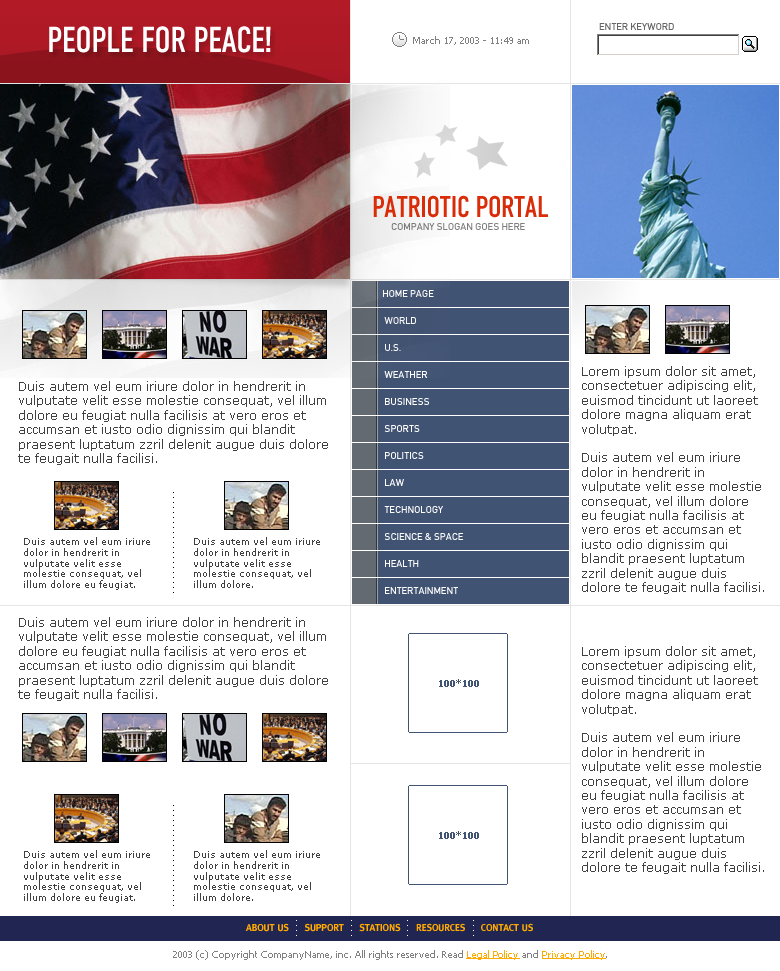
<style>
.page{position:relative;width:780px;height:971px;background:#ffffff}
.page>*{position:absolute;margin:0}
.t1{font:36px "DINCondensedC";letter-spacing:-0.02em;color:#ffffff;text-transform:uppercase}
.t2{font:10px "DinC";letter-spacing:-0.02em;color:#666666;text-transform:uppercase}
.t3{font:10px "Tahoma";color:#808080}
.t4{font:30px "DINCondensedC";letter-spacing:-0.02em;color:#d92d0a;text-transform:uppercase}
.t5{font:10px "DinC";letter-spacing:-0.02em;color:#7f7f7f;text-transform:uppercase}
.t6{font:10px/27px "DinC";letter-spacing:-0.02em;color:#ffffff;text-transform:uppercase}
.t7{font:12px "Verdana";color:#404040}
.t8{font:9px "Verdana";color:#404040}
.t9{font:9px "Verdana-Bold";color:#415373}
.t10{font:10px "MetaC-Bold";letter-spacing:-0.02em;color:#ffaa00;text-transform:uppercase}
.t11{font:10px "Tahoma";color:#ffaa00;text-decoration:underline}
</style>
<div class="page">
<p class="t1" style="left:49px;top:26px;width:222px;height:27px">people for peace!</p>
<p class="t2" style="left:599px;top:23px;width:75px;height:7px">enter keyword</p>
<p class="t3" style="left:413px;top:36px;width:116px;height:9px">March 17, 2003 - 11:49 am</p>
<p class="t4" style="left:373px;top:195px;width:175px;height:23px">patriotic portal</p>
<p class="t5" style="left:391px;top:223px;width:134px;height:7px">company slogan goes here</p>
<p class="t6" style="left:383px;top:290px;width:80px;height:304px">Home Page <br>  World <br>  U.S. <br>  Weather <br>  Business  <br>  Sports  <br>  Politics <br>  Law <br>  Technology <br>  Science &amp; Space <br>  Health <br>  Entertainment</p>
<p class="t7" style="left:582px;top:366px;width:182px;height:228px">Lorem ipsum dolor sit amet, <br>consectetuer adipiscing elit, <br>euismod tincidunt ut laoreet <br>dolore magna aliquam erat <br>volutpat. <br><br>Duis autem vel eum iriure <br>dolor in hendrerit in <br>vulputate velit esse molestie <br>consequat, vel illum dolore <br>eu feugiat nulla facilisis at <br>vero eros et accumsan et <br>iusto odio dignissim qui <br>blandit praesent luptatum <br>zzril delenit augue duis <br>dolore te feugait nulla facilisi.</p>
<p class="t7" style="left:18px;top:381px;width:310px;height:84px">Duis autem vel eum iriure dolor in hendrerit in <br>vulputate velit esse molestie consequat, vel illum <br>dolore eu feugiat nulla facilisis at vero eros et <br>accumsan et iusto odio dignissim qui blandit <br>praesent luptatum zzril delenit augue duis dolore <br>te feugait nulla facilisi.</p>
<p class="t8" style="left:24px;top:537px;width:126px;height:53px">Duis autem vel eum iriure <br>dolor in hendrerit in <br>vulputate velit esse <br>molestie consequat, vel <br>illum dolore eu feugiat.</p>
<p class="t8" style="left:194px;top:537px;width:126px;height:51px">Duis autem vel eum iriure <br>dolor in hendrerit in <br>vulputate velit esse <br>molestie consequat, vel <br>illum dolore.</p>
<p class="t7" style="left:18px;top:617px;width:310px;height:84px">Duis autem vel eum iriure dolor in hendrerit in <br>vulputate velit esse molestie consequat, vel illum <br>dolore eu feugiat nulla facilisis at vero eros et <br>accumsan et iusto odio dignissim qui blandit <br>praesent luptatum zzril delenit augue duis dolore <br>te feugait nulla facilisi.</p>
<p class="t7" style="left:582px;top:646px;width:182px;height:228px">Lorem ipsum dolor sit amet, <br>consectetuer adipiscing elit, <br>euismod tincidunt ut laoreet <br>dolore magna aliquam erat <br>volutpat. <br><br>Duis autem vel eum iriure <br>dolor in hendrerit in <br>vulputate velit esse molestie <br>consequat, vel illum dolore <br>eu feugiat nulla facilisis at <br>vero eros et accumsan et <br>iusto odio dignissim qui <br>blandit praesent luptatum <br>zzril delenit augue duis <br>dolore te feugait nulla facilisi.</p>
<p class="t9" style="left:439px;top:679px;width:40px;height:8px">100*100</p>
<p class="t9" style="left:439px;top:831px;width:40px;height:8px">100*100</p>
<p class="t8" style="left:24px;top:850px;width:126px;height:53px">Duis autem vel eum iriure <br>dolor in hendrerit in <br>vulputate velit esse <br>molestie consequat, vel <br>illum dolore eu feugiat.</p>
<p class="t8" style="left:194px;top:850px;width:126px;height:51px">Duis autem vel eum iriure <br>dolor in hendrerit in <br>vulputate velit esse <br>molestie consequat, vel <br>illum dolore.</p>
<p class="t10" style="left:245px;top:923px;width:288px;height:9px">About us     support     stations     resources     contact us</p>
<p class="t3" style="left:173px;top:950px;width:434px;height:10px">2003 (c) Copyright CompanyName, inc. All rights reserved. Read <span class="t11">Legal Policy</span> and <span class="t11">Privacy Policy</span>.</p>
</div>
